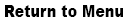
<style>
.page{position:relative;width:128px;height:24px;background:#ffffff}
.page>*{position:absolute;margin:0}
.t1{font:17.1px "Arial-Black";color:#000000;scale:0.84 1}
</style>
<div class="page">
<p class="t1" style="left:5px;top:5px;width:118px;height:12px">Return to Menu</p>
</div>
